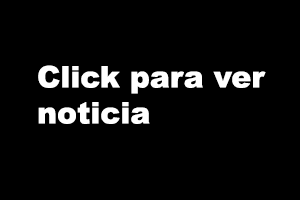
<style>
.page{position:relative;width:300px;height:200px;background:#000000}
.page>*{position:absolute;margin:0}
.t1{font:30px "Arial-Black";color:#ffffff}
</style>
<div class="page">
<p class="t1" style="left:38px;top:65px;width:228px;height:59px">Click para ver noticia</p>
</div>
